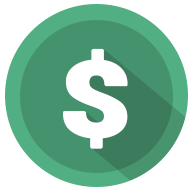
<style>
.page{position:relative;width:192px;height:192px;background:#ffffff}
.page>*{position:absolute;margin:0}
.t1{font:104.3px "Roboto-Black";color:#ffffff;font-weight:bold;scale:1.2 1}
</style>
<div class="page">
<p class="t1" style="left:63px;top:48px;width:65px;height:101px">$</p>
</div>
